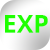
<style>
.page{position:relative;width:50px;height:50px}
.page>*{position:absolute;margin:0}
.t1{font:25px "OpenSans-Bold";color:#1eff00}
</style>
<div class="page">
<p class="t1" style="left:5px;top:15px;width:43px;height:18px">EXP</p>
</div>
